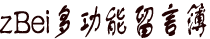
<style>
.page{position:relative;width:210px;height:39px;background:#ffffff}
.page>*{position:absolute;margin:0}
.t1{font:39.6px "FZSTK--GBK1-0";color:#220303;scale:0.67 1}
</style>
<div class="page">
<p class="t1" style="left:0px;top:3px;width:207px;height:36px">zBei多功能留言簿</p>
</div>
